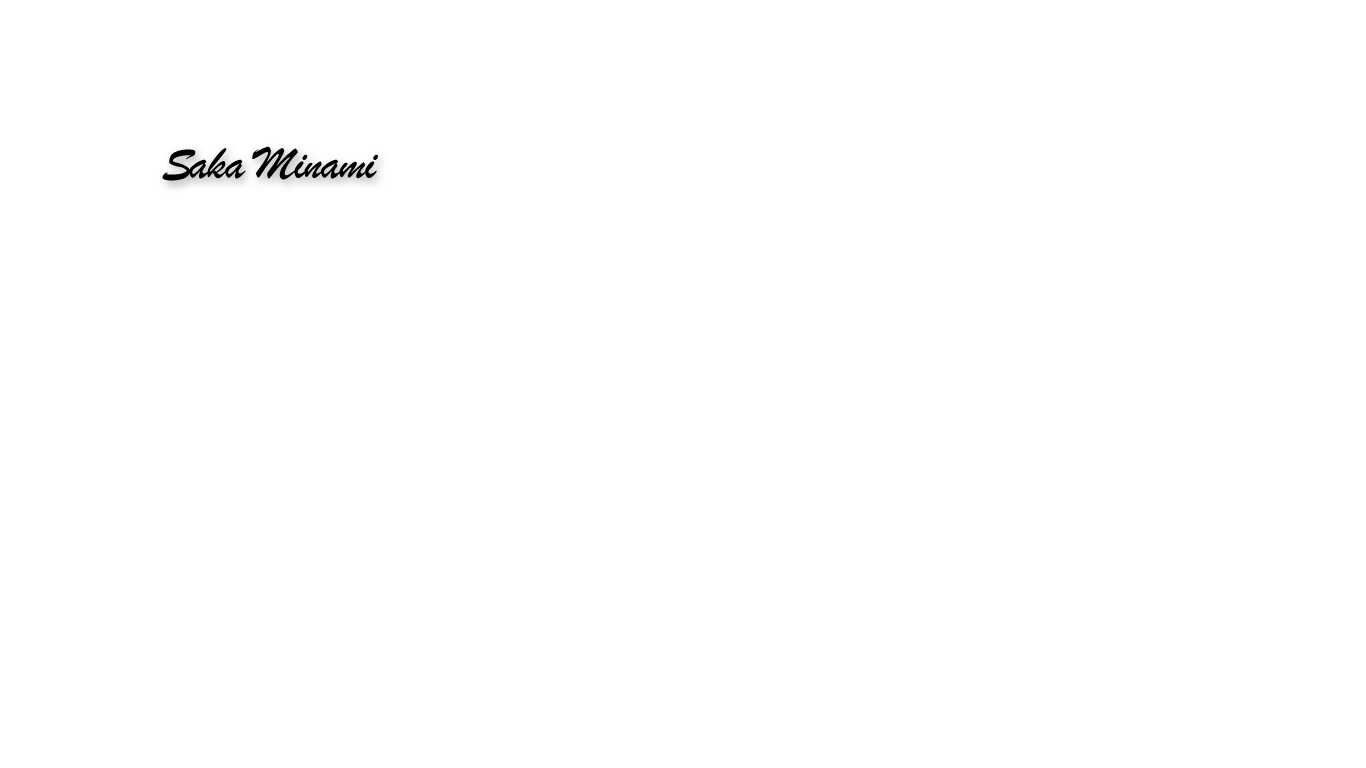
<style>
.page{position:relative;width:1366px;height:768px;background:#ffffff}
.page>*{position:absolute;margin:0}
.t1{font:48px "BrushScriptMT";letter-spacing:0.06em;color:#000000}
</style>
<div class="page">
<p class="t1" style="left:162px;top:146px;width:216px;height:35px">SakaMinami</p>
</div>
